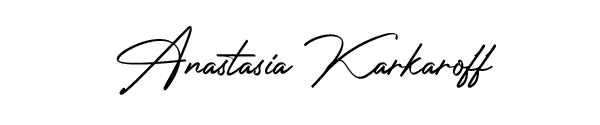
<style>
.page{position:relative;width:600px;height:125px;background:#ffffff}
.page>*{position:absolute;margin:0}
.t1{font:58.3px "PhotographSignature";color:#000000}
</style>
<div class="page">
<p class="t1" style="left:116px;top:26px;width:380px;height:69px">Anastasia Karkaroff</p>
</div>
